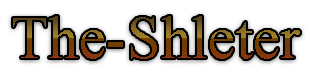
<style>
.page{position:relative;width:310px;height:75px;background:#ffffff}
.page>*{position:absolute;margin:0}
.t1{font:60px "TimesNewRomanPSMT";letter-spacing:0.01em}
</style>
<div class="page">
<p class="t1" style="left:13px;top:16px;width:287px;height:43px">The-Shleter</p>
</div>
